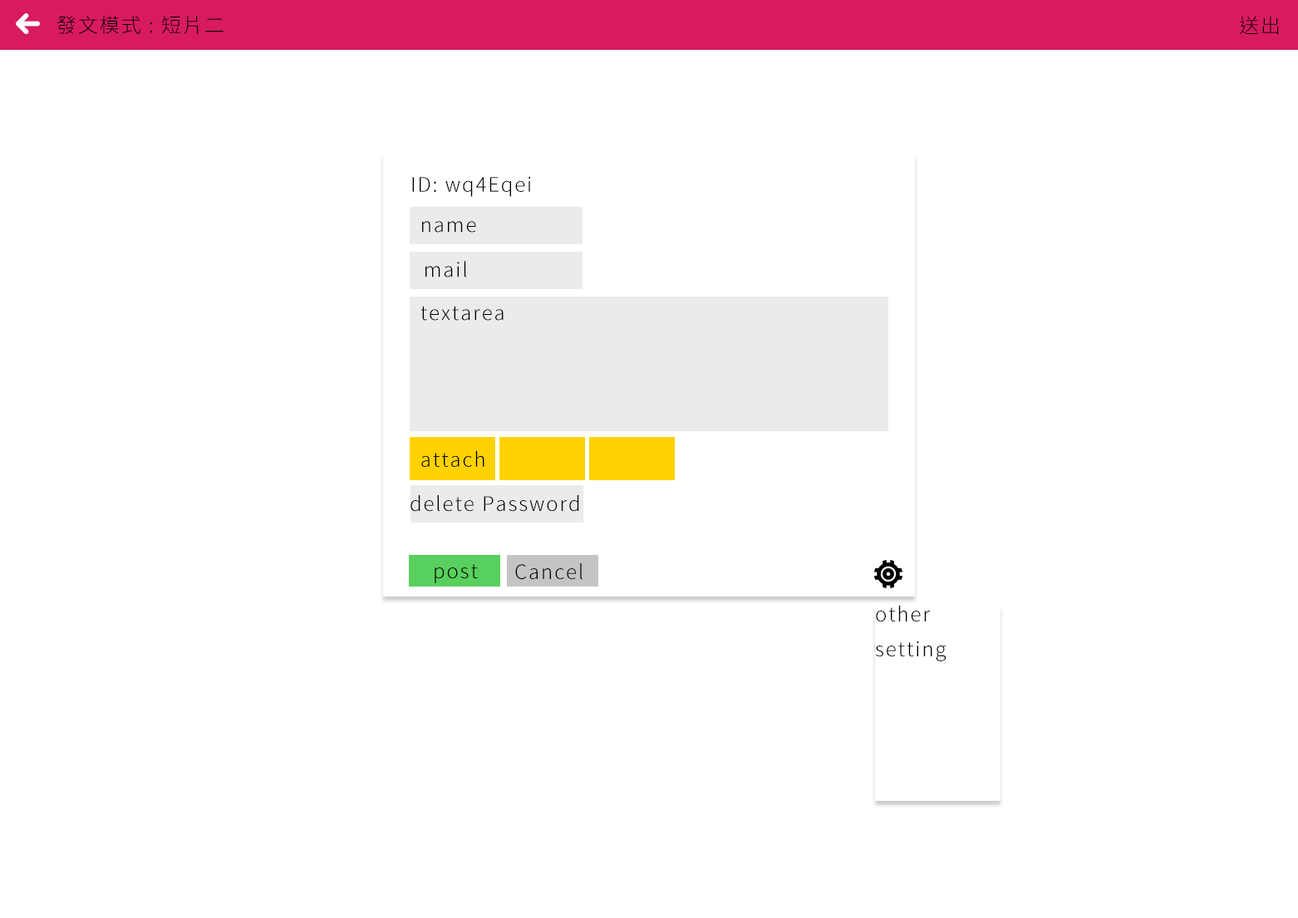
<style>
.page{position:relative;width:1298px;height:918px;background:#ffffff}
.page>*{position:absolute;margin:0}
.t1{font:19.9px "NotoSansCJKtc-Light";letter-spacing:0.08em;color:#000000}
</style>
<div class="page">
<p class="t1" style="left:57px;top:16px;width:167px;height:18px">發文模式 : 短片二</p>
<p class="t1" style="left:1240px;top:16px;width:39px;height:19px">送出</p>
<p class="t1" style="left:412px;top:176px;width:119px;height:21px">ID: wq4Eqei</p>
<p class="t1" style="left:422px;top:221px;width:54px;height:12px">name</p>
<p class="t1" style="left:426px;top:261px;width:41px;height:17px">mail</p>
<p class="t1" style="left:421px;top:306px;width:83px;height:15px">textarea</p>
<p class="t1" style="left:421px;top:450px;width:64px;height:17px">attach</p>
<p class="t1" style="left:411px;top:495px;width:168px;height:17px">delete Password</p>
<p class="t1" style="left:435px;top:564px;width:43px;height:19px">post</p>
<p class="t1" style="left:515px;top:564px;width:68px;height:16px">Cancel</p>
<p class="t1" style="left:876px;top:606px;width:71px;height:56px">other <br>setting</p>
</div>
